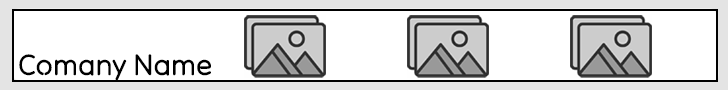
<style>
.page{position:relative;width:728px;height:90px;background:#ffffff}
.page>*{position:absolute;margin:0}
.t1{font:30px "TiltNeon-Regular";color:#000000;font-style:italic}
</style>
<div class="page">
<p class="t1" style="left:19px;top:54px;width:192px;height:27px">Comany Name</p>
</div>
